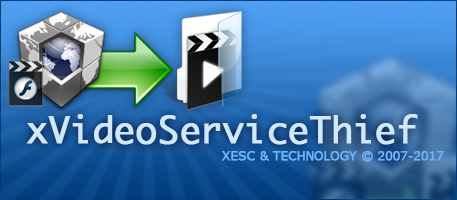
<style>
.page{position:relative;width:457px;height:200px}
.page>*{position:absolute;margin:0}
.t1{font:36px "Ayuthaya";letter-spacing:-0.035em;color:#cfe7ff;font-weight:bold}
.t2{font:12px "Verdana";letter-spacing:-0.035em;color:#6eb5ff;font-weight:bold}
</style>
<div class="page">
<p class="t1" style="left:27px;top:114px;width:391px;height:31px">xVideoServiceThief</p>
<p class="t2" style="left:222px;top:151px;width:222px;height:11px">XESC &amp; TECHNOLOGY © 2007-2017</p>
</div>
